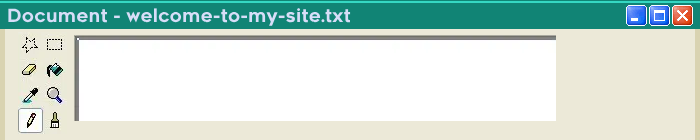
<style>
.page{position:relative;width:700px;height:140px;background:#ffffff}
.page>*{position:absolute;margin:0}
.t1{font:18px "Renogare-Regular";color:#d7def8}
</style>
<div class="page">
<p class="t1" style="left:8px;top:8px;width:343px;height:18px">Document - welcome-to-my-site.txt</p>
</div>
